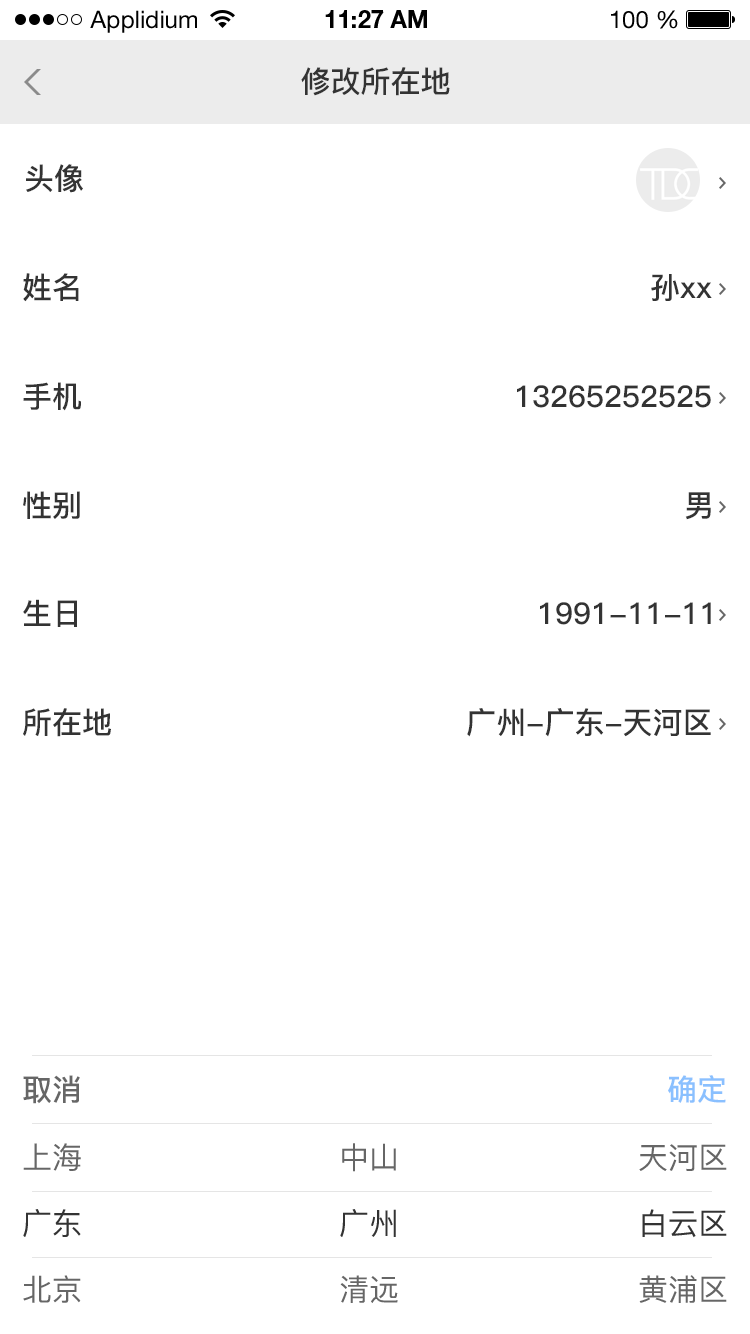
<style>
.page{position:relative;width:750px;height:1334px;background:#ffffff}
.page>*{position:absolute;margin:0}
.t1{font:24px "HelveticaNeueLTStd-Roman";color:#000000}
.t2{font:24px "HelveticaNeueLTStd-Bd";color:#000000}
.t3{font:30px "PingFang-SC-Bold";color:#333333}
.t4{font:30px "PingFang-SC-Bold";color:#666666}
.t5{font:30px "PingFang-SC-Bold";color:#8ac0ff}
.t6{font:30px "PingFang-SC-Medium";color:#666666}
.t7{font:30px "PingFang-SC-Medium";color:#333333}
</style>
<div class="page">
<p class="t1" style="left:90px;top:10px;width:107px;height:23px">Applidium</p>
<p class="t2" style="left:325px;top:10px;width:102px;height:18px">11:27 AM</p>
<p class="t1" style="left:611px;top:10px;width:67px;height:19px">100 %</p>
<p class="t3" style="left:301px;top:67px;width:149px;height:29px">修改所在地</p>
<p class="t3" style="left:26px;top:164px;width:57px;height:29px">头像</p>
<p class="t3" style="left:23px;top:273px;width:56px;height:29px">姓名</p>
<p class="t3" style="left:651px;top:274px;width:61px;height:27px">孙xx</p>
<p class="t3" style="left:23px;top:382px;width:58px;height:29px">手机</p>
<p class="t3" style="left:517px;top:385px;width:194px;height:23px">13265252525</p>
<p class="t3" style="left:23px;top:491px;width:57px;height:28px">性别</p>
<p class="t3" style="left:685px;top:492px;width:26px;height:28px">男</p>
<p class="t3" style="left:23px;top:599px;width:54px;height:28px">生日</p>
<p class="t3" style="left:540px;top:602px;width:171px;height:23px">1991-11-11</p>
<p class="t3" style="left:23px;top:708px;width:88px;height:29px">所在地</p>
<p class="t3" style="left:467px;top:708px;width:244px;height:29px">广州-广东-天河区</p>
<p class="t4" style="left:23px;top:1075px;width:57px;height:29px">取消</p>
<p class="t5" style="left:668px;top:1075px;width:58px;height:28px">确定</p>
<p class="t6" style="left:23px;top:1143px;width:58px;height:28px">上海</p>
<p class="t6" style="left:342px;top:1143px;width:54px;height:29px">中山</p>
<p class="t6" style="left:639px;top:1144px;width:88px;height:27px">天河区</p>
<p class="t7" style="left:23px;top:1209px;width:58px;height:28px">广东</p>
<p class="t7" style="left:340px;top:1209px;width:56px;height:28px">广州</p>
<p class="t7" style="left:642px;top:1209px;width:85px;height:29px">白云区</p>
<p class="t6" style="left:23px;top:1275px;width:58px;height:28px">北京</p>
<p class="t6" style="left:340px;top:1275px;width:58px;height:28px">清远</p>
<p class="t6" style="left:639px;top:1275px;width:88px;height:28px">黄浦区</p>
</div>
